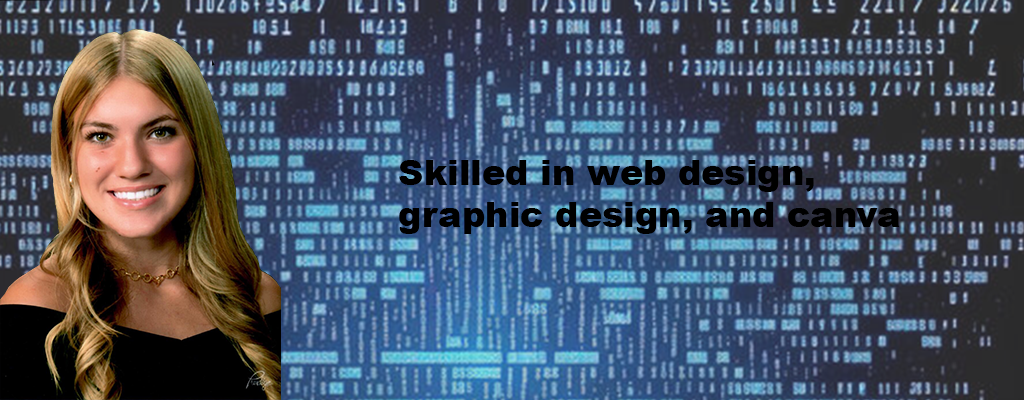
<style>
.page{position:relative;width:1024px;height:400px}
.page>*{position:absolute;margin:0}
.t1{font:35px "Arial-Black";color:#000000}
</style>
<div class="page">
<p class="t1" style="left:399px;top:160px;width:501px;height:74px">Skilled in web design, <br>graphic design, and canva</p>
</div>
